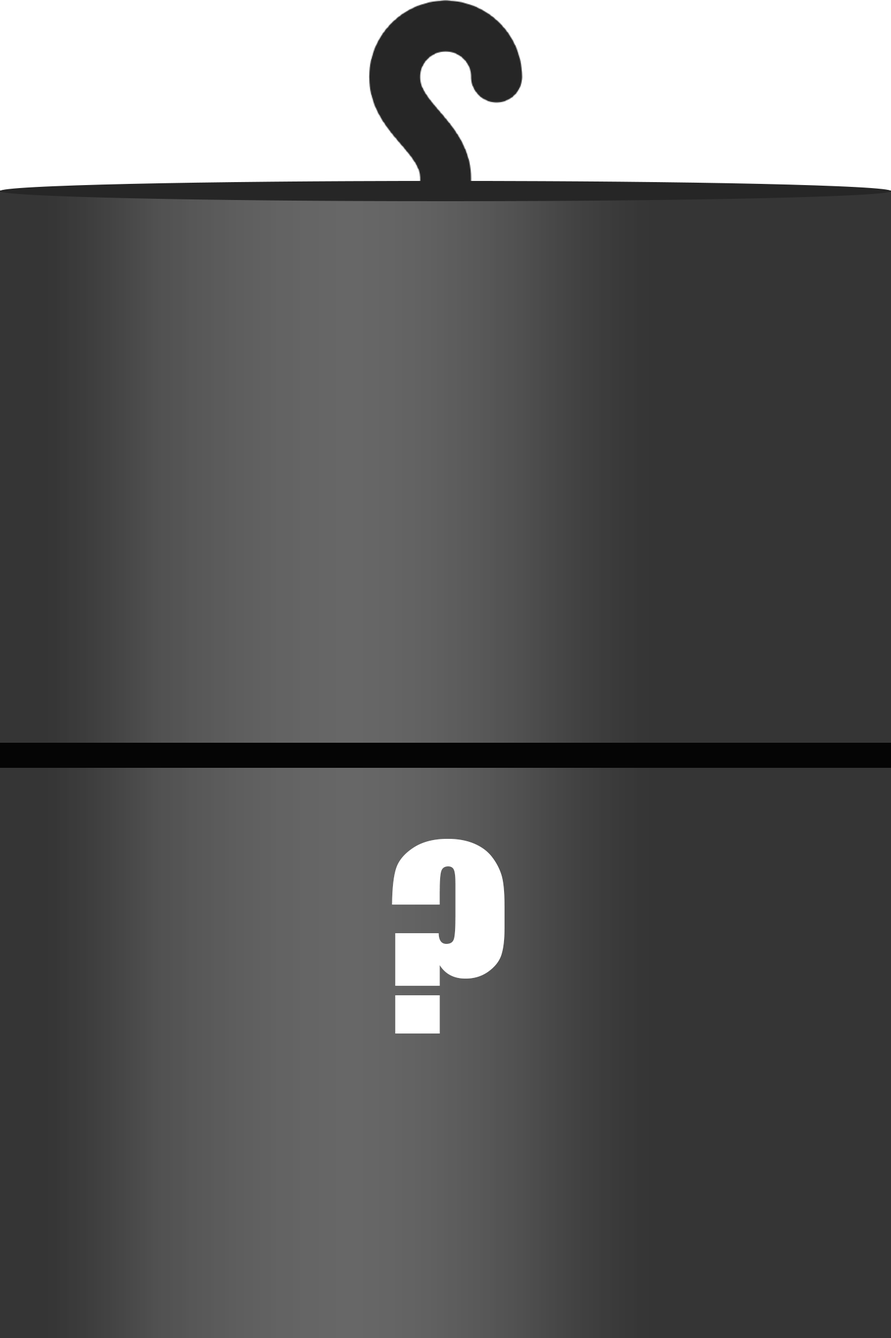
<style>
.page{position:relative;width:891px;height:1338px;background:#353535}
.page>*{position:absolute;margin:0}
.t1{font:241.3px "Impact";color:#ffffff}
</style>
<div class="page">
<p class="t1" style="left:392px;top:839px;width:113px;height:195px">?</p>
</div>
